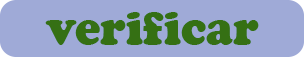
<style>
.page{position:relative;width:306px;height:57px;background:#9faad7}
.page>*{position:absolute;margin:0}
.t1{font:48px "CooperBlack";color:#357014}
</style>
<div class="page">
<p class="t1" style="left:45px;top:12px;width:214px;height:33px">verificar</p>
</div>
